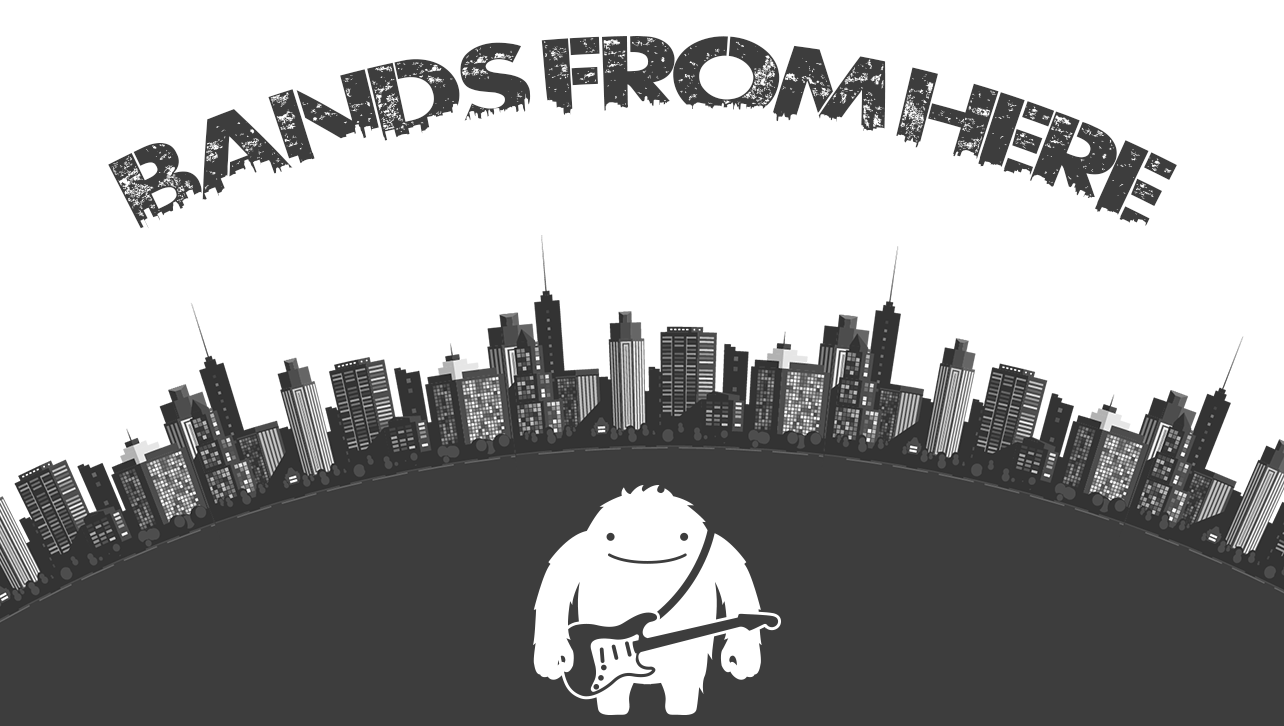
<style>
.page{position:relative;width:1284px;height:726px;background:#ffffff}
.page>*{position:absolute;margin:0}
.t1{font:100px "UrbanJungleDEMO";color:#3d3d3d}
</style>
<div class="page">
<p class="t1" style="left:108px;top:36px;width:1069px;height:193px;text-align:center">bands from here</p>
</div>
